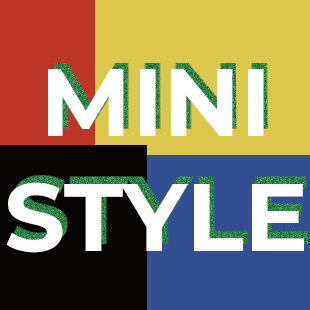
<style>
.page{position:relative;width:310px;height:310px;background:#dcc74d}
.page>*{position:absolute;margin:0}
.t1{font:95.8px "Montserrat-Bold";color:#ffffff}
</style>
<div class="page">
<p class="t1" style="left:6px;top:69px;width:298px;height:184px;text-align:center">MINI<br>STYLE</p>
</div>
